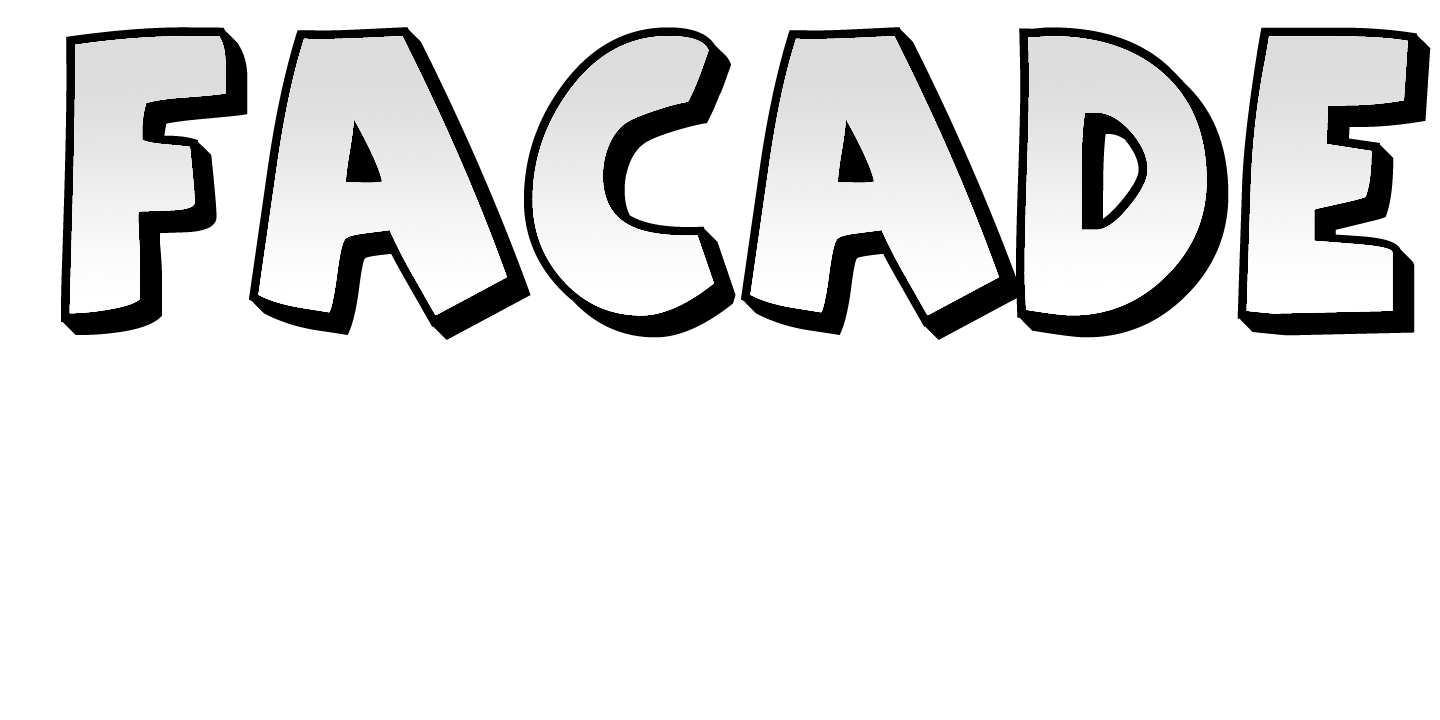
<style>
.page{position:relative;width:1440px;height:720px;background:#ffffff}
.page>*{position:absolute;margin:0}
.t1{font:280px "AgentOrange";color:#000000}
</style>
<div class="page">
<p class="t1" style="left:61px;top:27px;width:1370px;height:313px">Facade</p>
</div>
